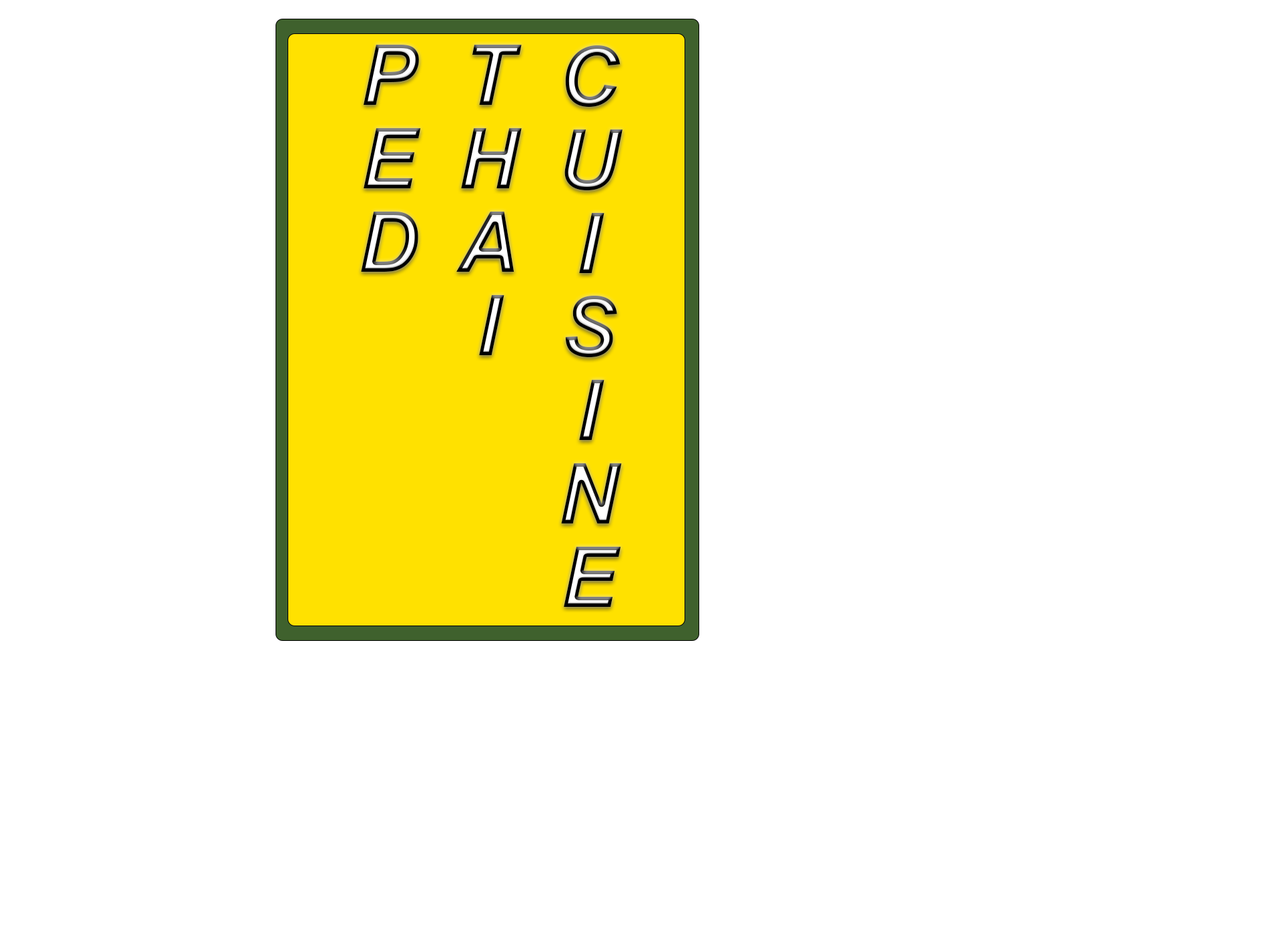
<style>
.page{position:relative;width:1261px;height:946px;background:#ffffff}
.page>*{position:absolute;margin:0}
.t1{font:83.4px "Arial-BoldItalicMT"}
</style>
<div class="page">
<p class="t1" style="left:361px;top:45px;width:262px;height:562px">CUISINE<br>THAI<br>PED</p>
</div>
